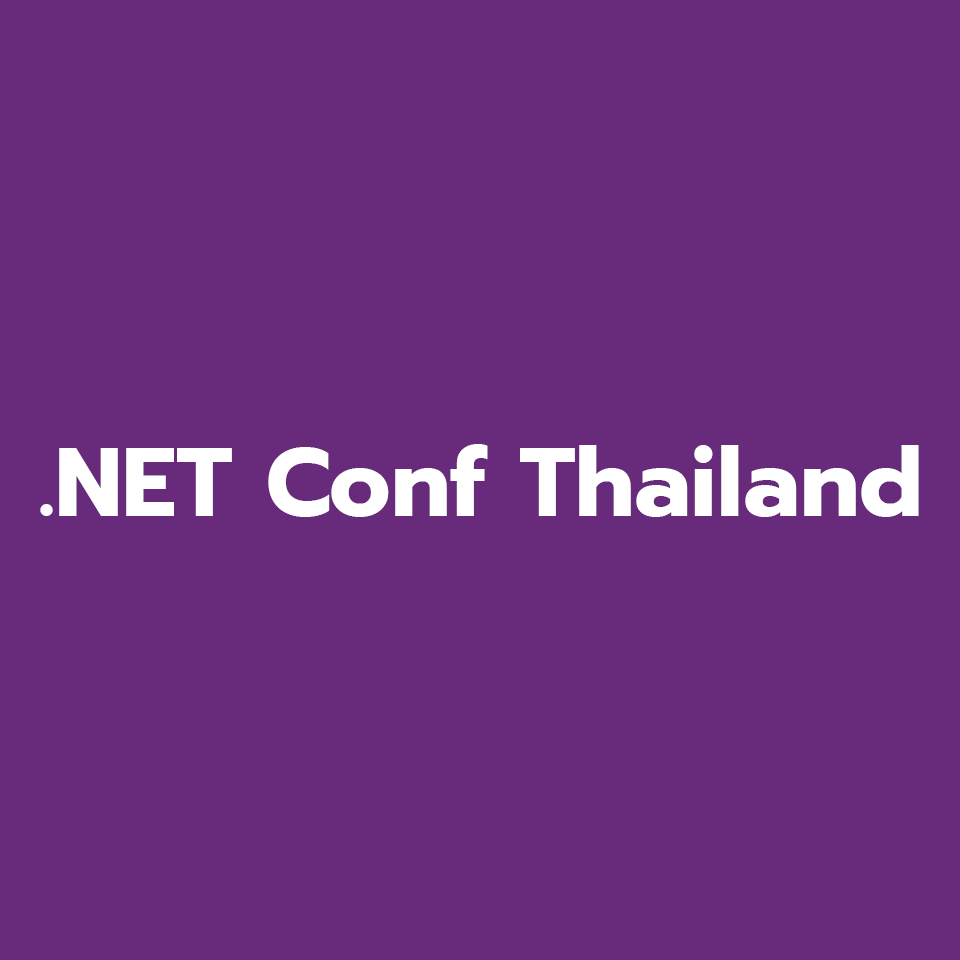
<style>
.page{position:relative;width:960px;height:960px;background:#682a7b}
.page>*{position:absolute;margin:0}
.t1{font:96px "Prompt-Bold";color:#ffffff}
</style>
<div class="page">
<p class="t1" style="left:40px;top:444px;width:879px;height:73px">.NET Conf Thailand</p>
</div>
